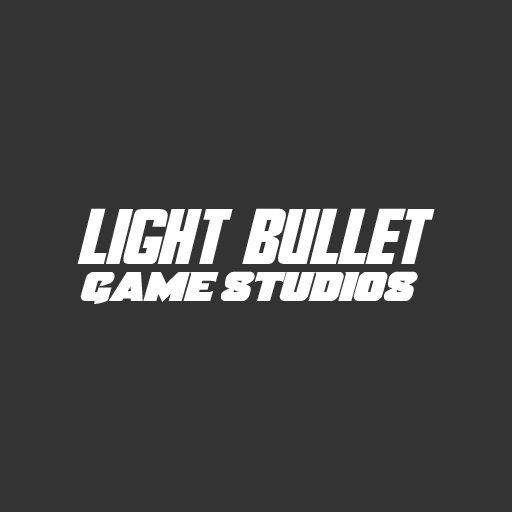
<style>
.page{position:relative;width:512px;height:512px;background:#333333}
.page>*{position:absolute;margin:0}
.t1{font:75.4px "HesDeadJim";letter-spacing:-0.03em;color:#ffffff;text-transform:uppercase}
.t2{font:43.5px "Justice";letter-spacing:-0.03em;color:#ffffff;text-transform:uppercase}
</style>
<div class="page">
<p class="t1" style="left:77px;top:208px;width:358px;height:56px">Light Bullet</p>
<p class="t2" style="left:80px;top:271px;width:338px;height:33px">game studios</p>
</div>
